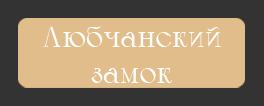
<style>
.page{position:relative;width:264px;height:106px;background:#e0bd8b}
.page>*{position:absolute;margin:0}
.t1{font:30px "Calypso-Regular";color:#ffffff}
</style>
<div class="page">
<p class="t1" style="left:43px;top:26px;width:178px;height:57px;text-align:center">Любчанский<br>замок</p>
</div>
